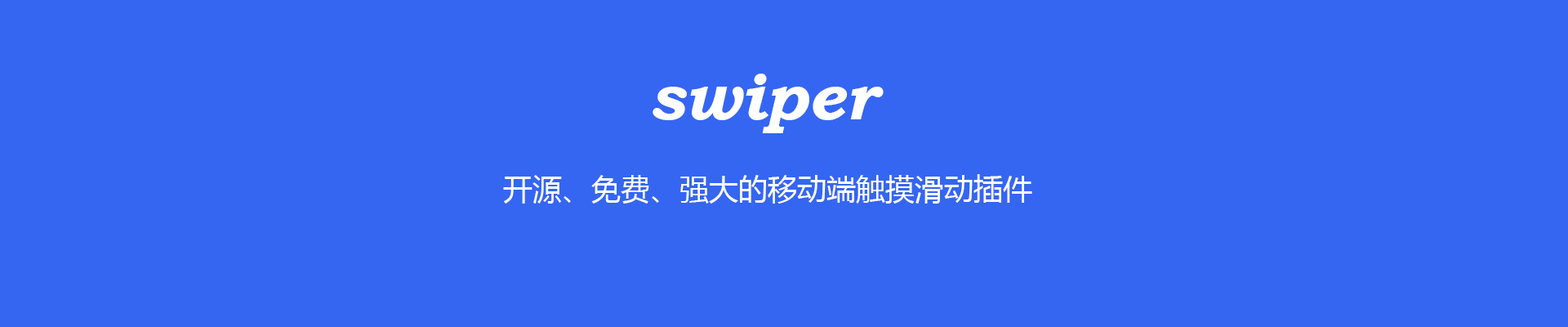
<style>
.page{position:relative;width:1568px;height:327px;background:#3566f2}
.page>*{position:absolute;margin:0}
.t1{font:65.3px "BookmanOldStyle-BoldItalic";color:#ffffff}
.t2{font:29.4px "MicrosoftYaHei";color:#ffffff}
</style>
<div class="page">
<p class="t1" style="left:653px;top:74px;width:231px;height:59px">swiper</p>
<p class="t2" style="left:503px;top:174px;width:529px;height:29px">开源、免费、强大的移动端触摸滑动插件</p>
</div>
